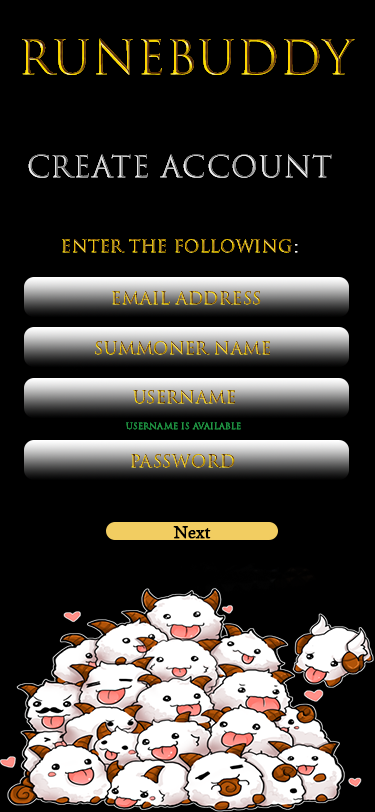
<style>
.page{position:relative;width:375px;height:812px;background:#000000}
.page>*{position:absolute;margin:0}
.t1{font:29.2px "TrajanColor-Concept";font-weight:bold}
.t2{font:16.7px "TrajanColor-Concept";font-weight:bold}
.t3{font:16.7px "TimesNewRomanPSMT";font-weight:bold}
.t4{font:8.3px "TrajanColor-Concept";color:#1f8e41;font-weight:bold}
.t5{font:16.7px "CalistoMT";color:#000000;font-weight:bold}
</style>
<div class="page">
<p class="t1" style="left:28px;top:154px;width:304px;height:24px">CREATE ACCOUNT</p>
<p class="t2" style="left:62px;top:239px;width:236px;height:14px">Enter the following<span class="t3">:</span></p>
<p class="t2" style="left:112px;top:291px;width:149px;height:14px">Email Address</p>
<p class="t2" style="left:95px;top:341px;width:175px;height:14px">SummONER NAME</p>
<p class="t2" style="left:133px;top:390px;width:102px;height:14px">Username</p>
<p class="t4" style="left:126px;top:422px;width:115px;height:8px">USERNAME IS AVAILABLE</p>
<p class="t2" style="left:131px;top:454px;width:104px;height:14px">password</p>
<p class="t5" style="left:173px;top:526px;width:38px;height:13px">Next</p>
</div>
